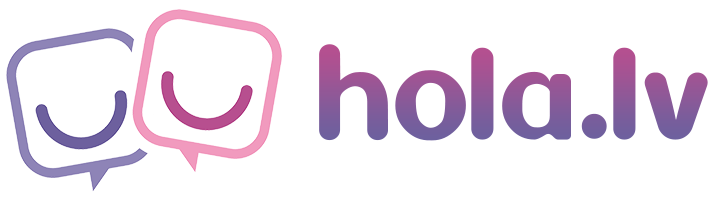
<style>
.page{position:relative;width:720px;height:200px;background:#ffffff}
.page>*{position:absolute;margin:0}
.t1{font:150px "Dyuthi-Regular"}
</style>
<div class="page">
<p class="t1" style="left:319px;top:44px;width:389px;height:97px">hola.lv</p>
</div>
